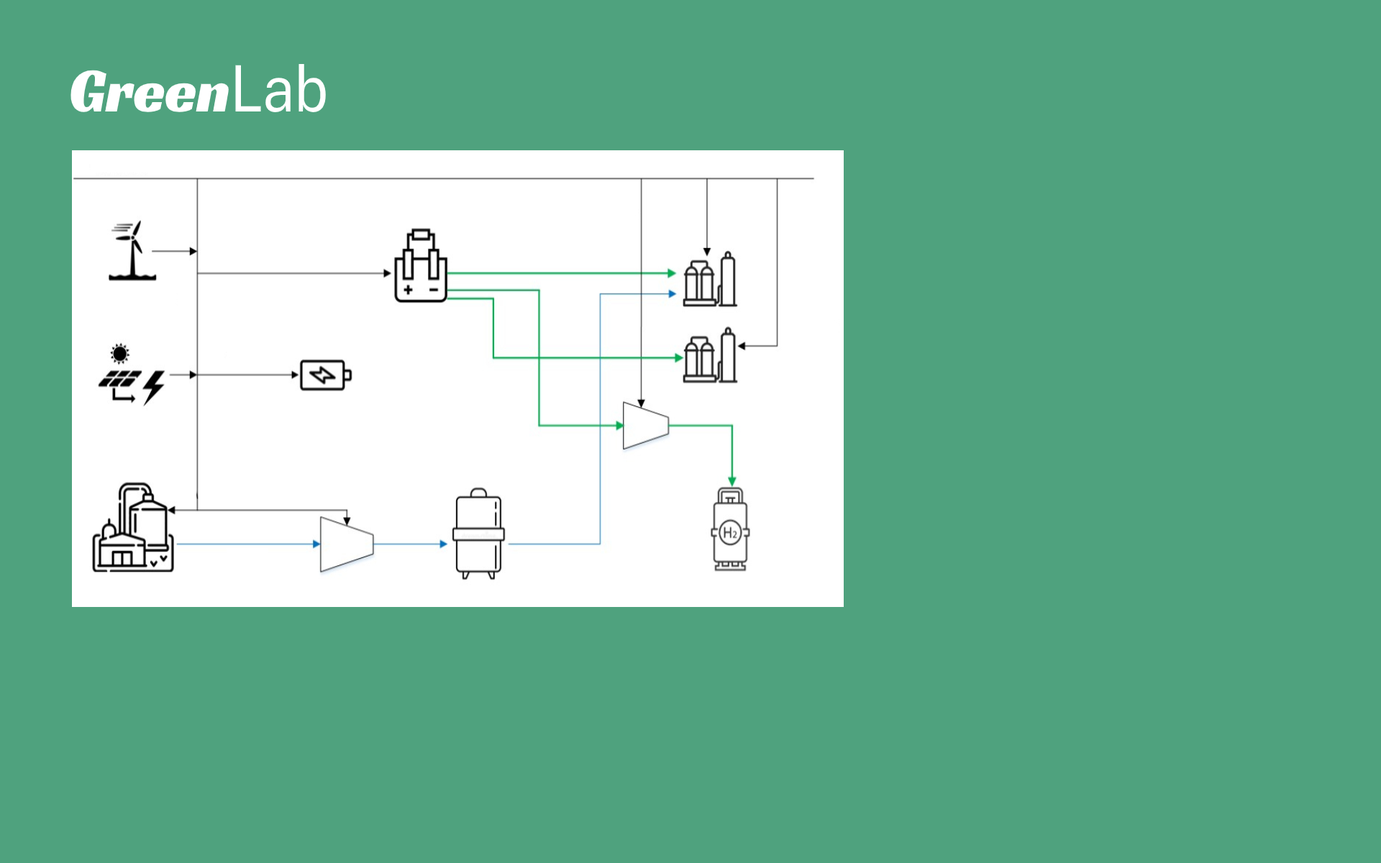
<style>
.page{position:relative;width:1381px;height:863px;background:#4fa27e}
.page>*{position:absolute;margin:0}
.t1{font:63.9px "RacingSansOne-Regular";color:#ffffff;scale:0.9 1}
.t2{font:63.9px "PublicSans-Regular";color:#ffffff;scale:0.9 1}
</style>
<div class="page">
<p class="t1" style="left:71px;top:64px;width:255px;height:48px">Green<span class="t2">Lab</span></p>
</div>
